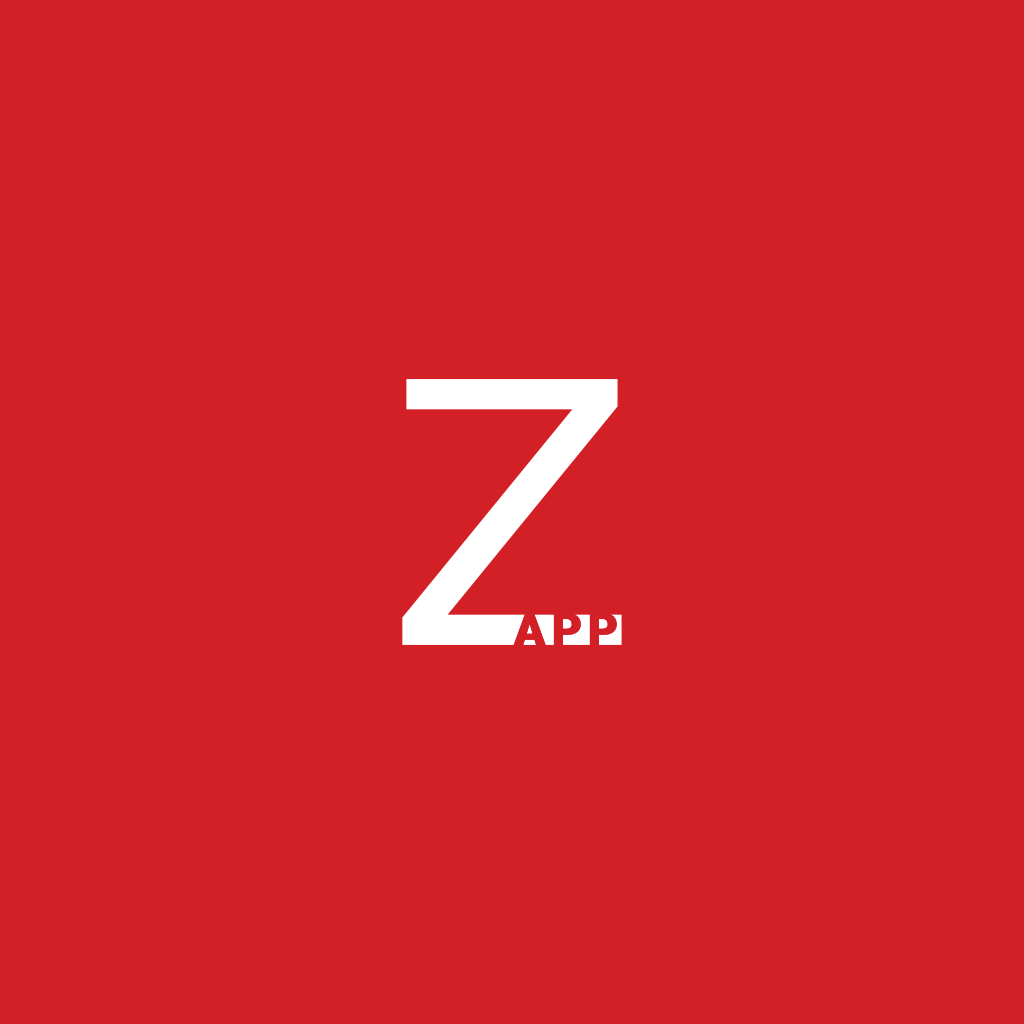
<style>
.page{position:relative;width:1024px;height:1024px;background:#d31f26}
.page>*{position:absolute;margin:0}
.t1{font:46.5px "Roboto-Bold_887.000wght_100.000wdth";letter-spacing:0.109em;color:#d31f26;font-weight:bold}
</style>
<div class="page">
<p class="t1" style="left:513px;top:612px;width:104px;height:34px">APP</p>
<p class="t1" style="left:513px;top:612px;width:104px;height:34px">APP</p>
</div>
